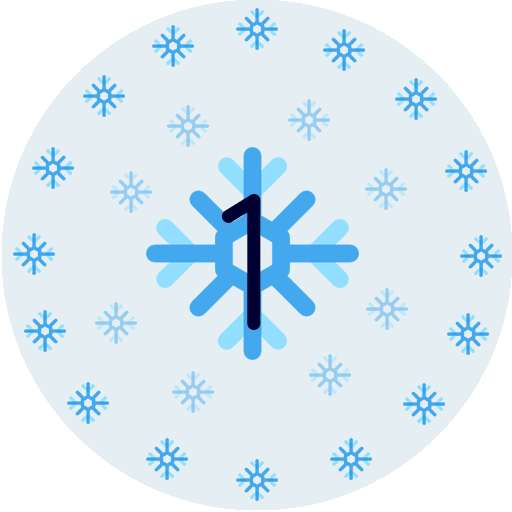
<style>
.page{position:relative;width:512px;height:512px;background:#e5eff3}
.page>*{position:absolute;margin:0}
.t1{font:213.3px "Antipasto";color:#000033}
</style>
<div class="page">
<p class="t1" style="left:221px;top:194px;width:40px;height:136px">1</p>
</div>
